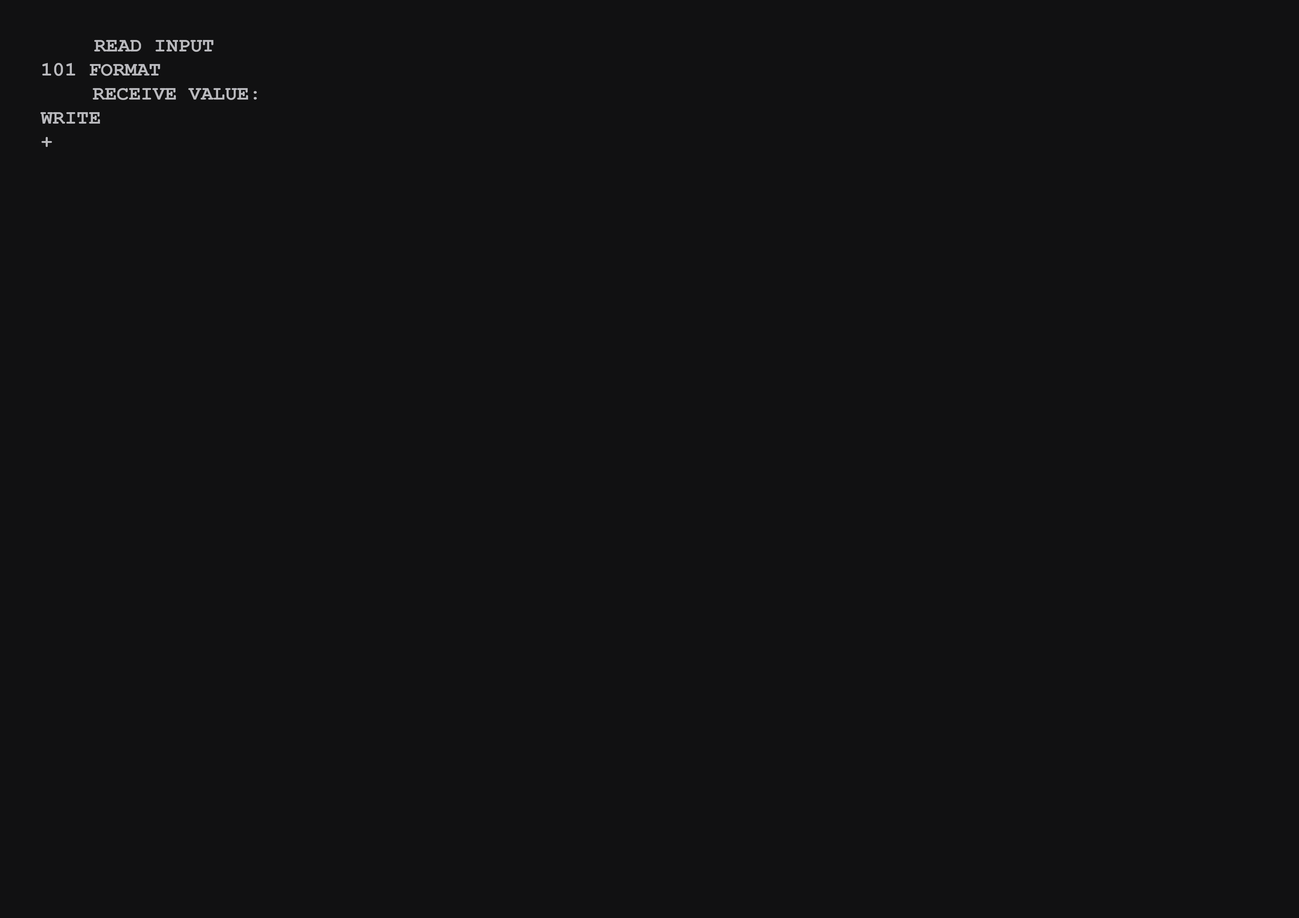
<style>
.page{position:relative;width:1299px;height:918px;background:#111112}
.page>*{position:absolute;margin:0}
.t1{font:20.1px "CourierNewPS-BoldMT";color:#b9b9bd}
</style>
<div class="page">
<p class="t1" style="left:40px;top:40px;width:217px;height:107px">READ INPUT  <br>101 FORMAT<br>    RECEIVE VALUE:<br>WRITE <br>+</p>
</div>
